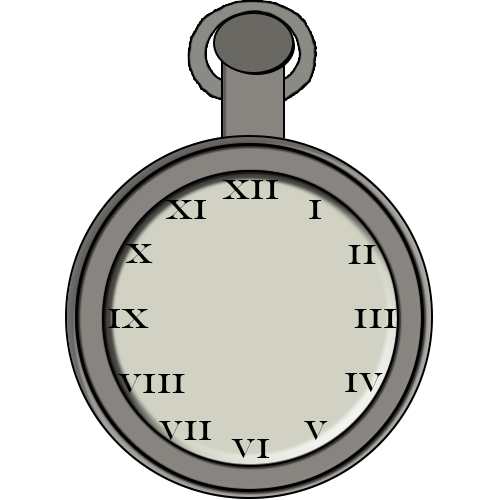
<style>
.page{position:relative;width:500px;height:500px;background:#ffffff}
.page>*{position:absolute;margin:0}
.t1{font:27.7px "EngraversMT";color:#000000}
</style>
<div class="page">
<p class="t1" style="left:222px;top:180px;width:57px;height:19px">XII</p>
<p class="t1" style="left:165px;top:200px;width:42px;height:19px">XI</p>
<p class="t1" style="left:309px;top:200px;width:13px;height:19px">I</p>
<p class="t1" style="left:125px;top:244px;width:28px;height:19px">X</p>
<p class="t1" style="left:348px;top:245px;width:28px;height:19px">II</p>
<p class="t1" style="left:108px;top:309px;width:41px;height:19px">Ix</p>
<p class="t1" style="left:354px;top:309px;width:43px;height:19px">III</p>
<p class="t1" style="left:118px;top:374px;width:67px;height:19px">VIII</p>
<p class="t1" style="left:345px;top:373px;width:38px;height:19px">IV</p>
<p class="t1" style="left:159px;top:421px;width:53px;height:19px">VII</p>
<p class="t1" style="left:304px;top:421px;width:24px;height:19px">V</p>
<p class="t1" style="left:231px;top:439px;width:39px;height:19px">VI</p>
</div>
